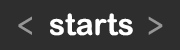
<style>
.page{position:relative;width:180px;height:50px;background:#2e2e2e}
.page>*{position:absolute;margin:0}
.t1{font:30px "ArialRoundedMTBold";color:#ffffff}
</style>
<div class="page">
<p class="t1" style="left:50px;top:13px;width:83px;height:23px">starts</p>
</div>
